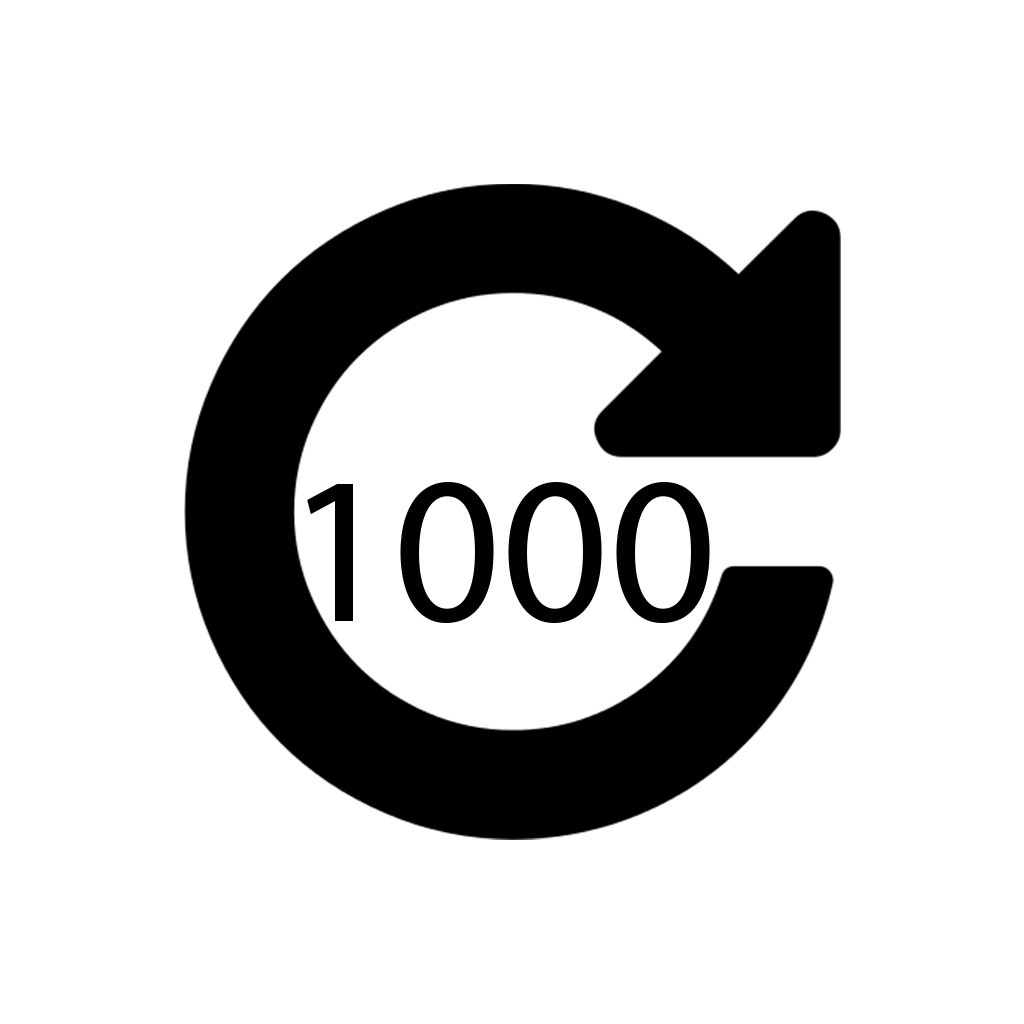
<style>
.page{position:relative;width:1024px;height:1024px;background:#ffffff}
.page>*{position:absolute;margin:0}
.t1{font:210.4px "MyriadPro-Regular";color:#000000}
</style>
<div class="page">
<p class="t1" style="left:307px;top:482px;width:403px;height:141px">1000</p>
</div>
